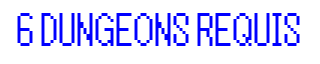
<style>
.page{position:relative;width:320px;height:64px;background:#ffffff}
.page>*{position:absolute;margin:0}
.t1{font:24px "TLOZ-Minish-Cap/A-Link-to-the-Past/Four-Sword";color:#0000ff}
</style>
<div class="page">
<p class="t1" style="left:17px;top:13px;width:283px;height:33px">6 DUNGEONS REQUIS</p>
</div>
